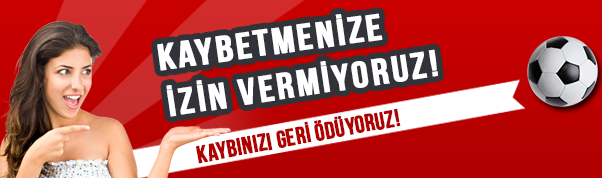
<style>
.page{position:relative;width:602px;height:178px}
.page>*{position:absolute;margin:0}
.t1{font:36.5px "BebasNeue";letter-spacing:0.05em;color:#ffffff;text-transform:uppercase;font-weight:bold;scale:1.14 1}
</style>
<div class="page">
<p class="t1" style="left:157px;top:13px;width:226px;height:58px;rotate:-8deg">kaybetmenİZE</p>
<p class="t1" style="left:166px;top:49px;width:272px;height:68px;rotate:-9deg">İZİN VERMİYORUZ!</p>
</div>
